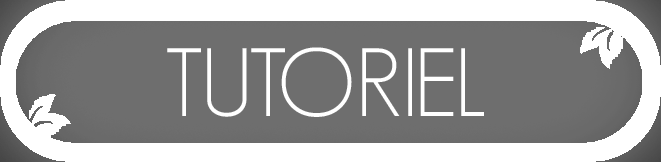
<style>
.page{position:relative;width:661px;height:162px;background:#6e6e6e}
.page>*{position:absolute;margin:0}
.t1{font:94.8px "GeosansLight";color:#ffffff}
</style>
<div class="page">
<p class="t1" style="left:167px;top:47px;width:317px;height:70px">TUTORIEL</p>
</div>
